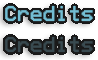
<style>
.page{position:relative;width:98px;height:60px;background:#1a1a1a}
.page>*{position:absolute;margin:0}
.t1{font:17px "VHSGothic";color:#73bed3}
</style>
<div class="page">
<p class="t1" style="left:5px;top:5px;width:88px;height:17px">Credits</p>
</div>
